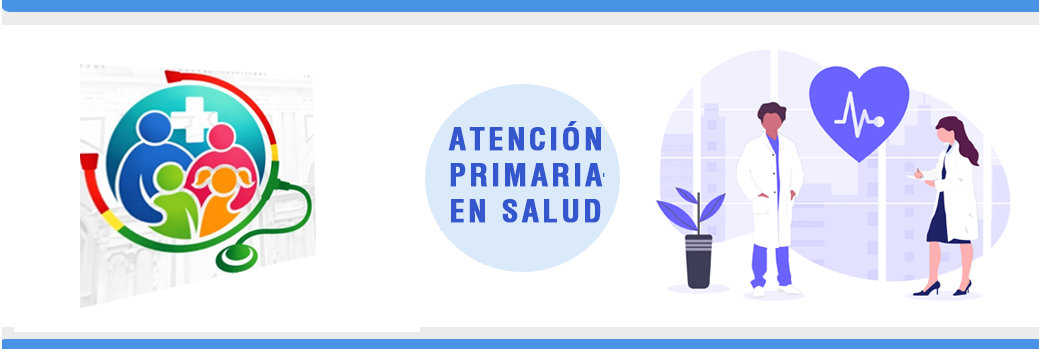
<style>
.page{position:relative;width:1039px;height:350px;background:#ffffff}
.page>*{position:absolute;margin:0}
.t1{font:30px "Helvetica-Condensed-Bold";letter-spacing:0.1em;color:#3457cd;font-weight:bold}
</style>
<div class="page">
<p class="t1" style="left:448px;top:121px;width:155px;height:102px;text-align:center">ATENCIÓN<br>PRIMARIA<br>EN SALUD</p>
</div>
